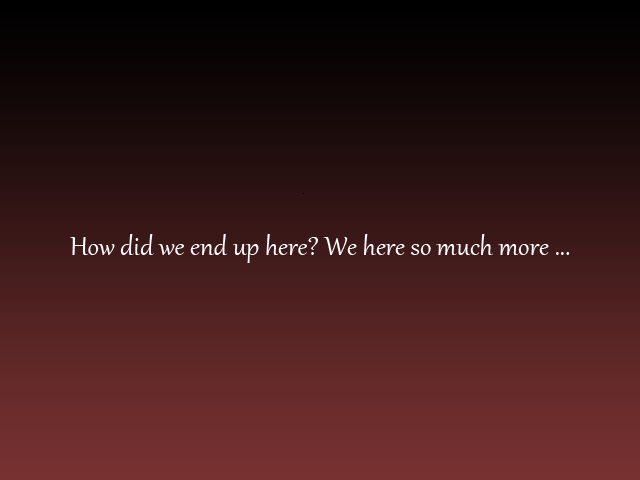
<style>
.page{position:relative;width:640px;height:480px}
.page>*{position:absolute;margin:0}
.t1{font:32px "Gabriola";color:#ffffff}
.t2{font:37.3px "Gabriola";color:#ffffff}
</style>
<div class="page">
<p class="t1" style="left:70px;top:234px;width:500px;height:29px"><span class="t2"><br></span><br><br><br><br><br>How did we end up here? We here so much more ...</p>
</div>
